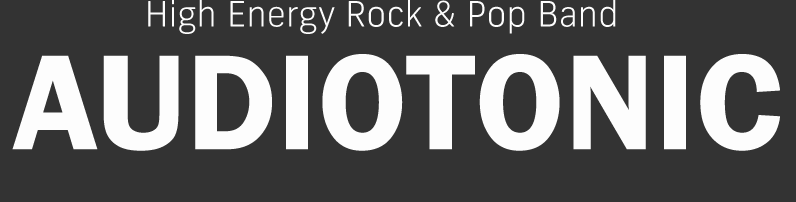
<style>
.page{position:relative;width:796px;height:202px;background:#333333}
.page>*{position:absolute;margin:0}
.t1{font:35px "FrankNew-Light";color:#fdfdfd}
.t2{font:140px "FranklinGothic-Demi";color:#fdfdfd}
</style>
<div class="page">
<p class="t1" style="left:148px;top:0px;width:468px;height:34px">High Energy Rock &amp; Pop Band</p>
<p class="t2" style="left:12px;top:54px;width:768px;height:97px">AUDIOTONIC</p>
</div>
